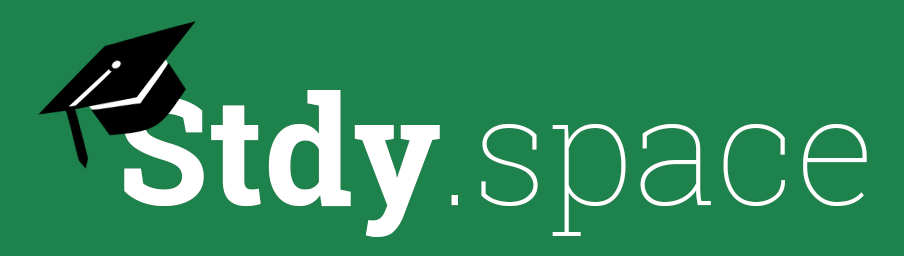
<style>
.page{position:relative;width:904px;height:256px;background:#1e824c}
.page>*{position:absolute;margin:0}
.t1{font:150px "RobotoSlab-Thin";color:#ffffff}
.t2{font:150px "RobotoSlab-Bold";color:#ffffff}
</style>
<div class="page">
<p class="t1" style="left:124px;top:90px;width:743px;height:147px"><span class="t2">Stdy</span>.space</p>
</div>
